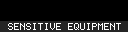
<style>
.page{position:relative;width:128px;height:32px;background:#000000}
.page>*{position:absolute;margin:0}
.t1{font:8px "Terminal";color:#ffffff}
</style>
<div class="page">
<p class="t1" style="left:8px;top:23px;width:113px;height:7px">SENSITIVE EQUIPMENT</p>
</div>
